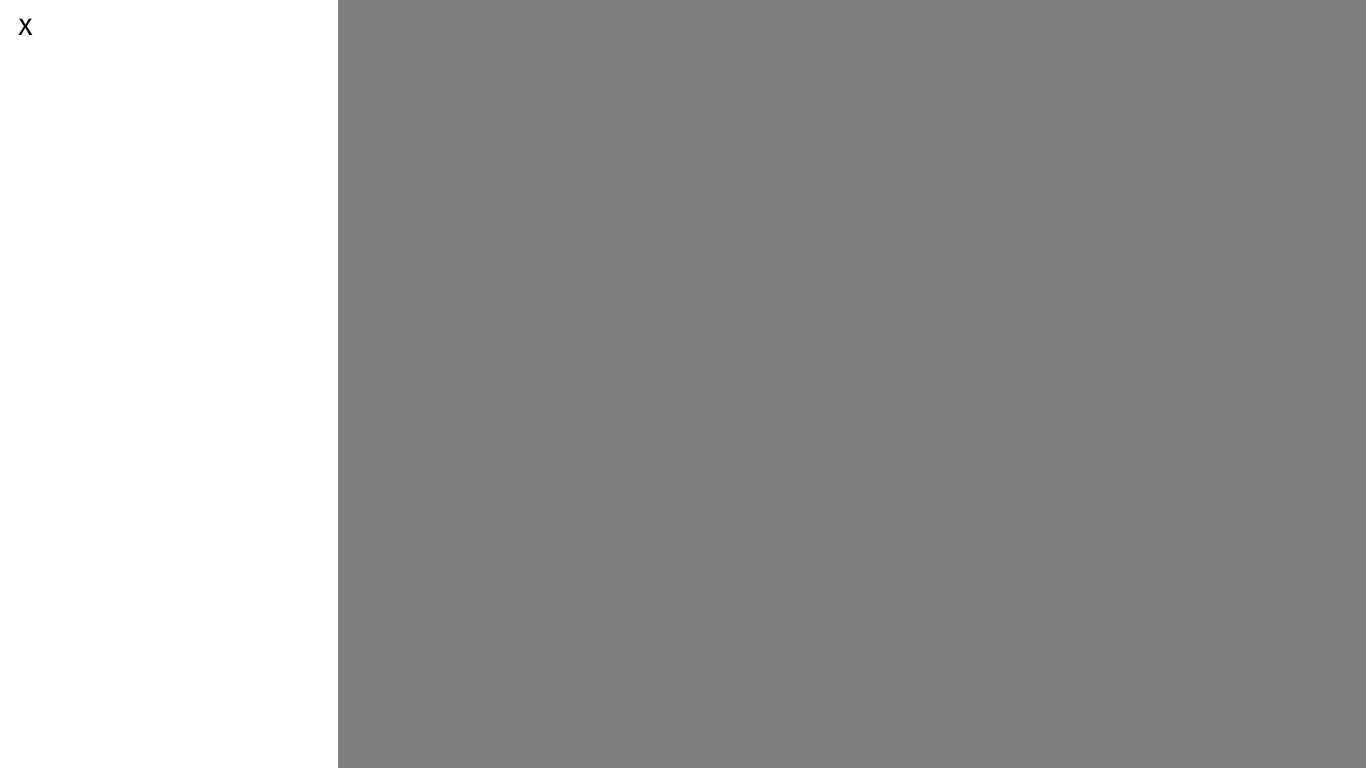
<style>
.page{position:relative;width:1366px;height:768px;background:#7f7f7f}
.page>*{position:absolute;margin:0}
.t1{font:31.5px "FiraSans-Regular";color:#000000;scale:0.95 1}
</style>
<div class="page">
<p class="t1" style="left:18px;top:18px;width:15px;height:17px">x</p>
</div>
